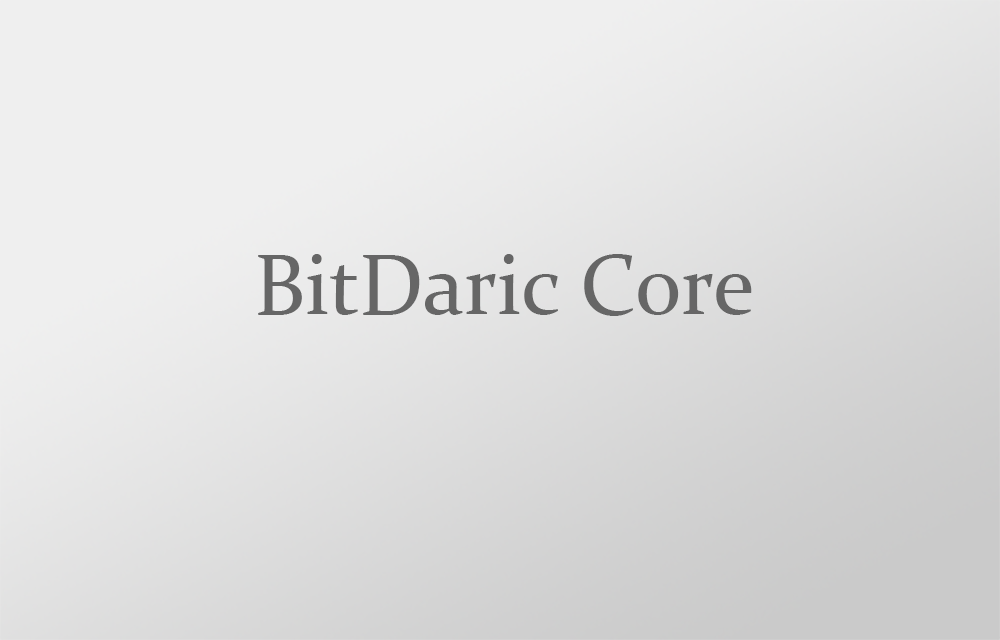
<style>
.page{position:relative;width:1000px;height:640px}
.page>*{position:absolute;margin:0}
.t1{font:85.7px "Constantia";color:#666666}
</style>
<div class="page">
<p class="t1" style="left:258px;top:254px;width:494px;height:62px">BitDaric Core</p>
</div>
